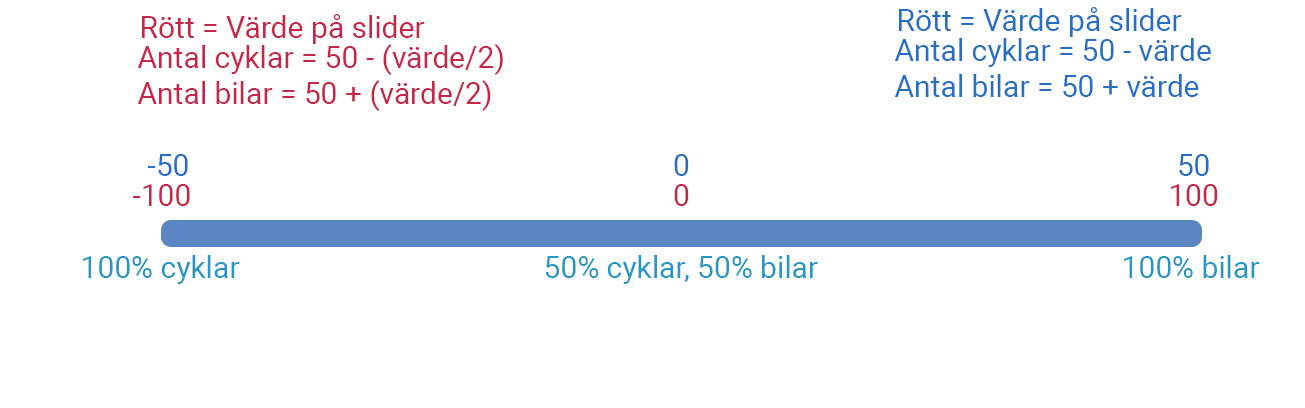
<style>
.page{position:relative;width:1305px;height:408px;background:#ffffff}
.page>*{position:absolute;margin:0}
.t1{font:30px "Roboto-Regular";color:#c52748}
.t2{font:30px "Roboto-Regular";color:#276ec5}
.t3{font:30px "Roboto-Regular";color:#2796c5}
</style>
<div class="page">
<p class="t1" style="left:142px;top:14px;width:283px;height:30px">Rött = Värde på slider</p>
<p class="t2" style="left:899px;top:7px;width:283px;height:30px">Rött = Värde på slider</p>
<p class="t2" style="left:894px;top:38px;width:317px;height:59px">Antal cyklar = 50 - värde<br>Antal bilar = 50 + värde</p>
<p class="t1" style="left:137px;top:44px;width:366px;height:67px">Antal cyklar = 50 - (värde/2)<br>Antal bilar = 50 + (värde/2)</p>
<p class="t2" style="left:148px;top:154px;width:40px;height:22px">-50</p>
<p class="t2" style="left:674px;top:154px;width:15px;height:22px">0</p>
<p class="t2" style="left:1179px;top:154px;width:30px;height:22px">50</p>
<p class="t1" style="left:133px;top:184px;width:57px;height:22px">-100</p>
<p class="t1" style="left:674px;top:184px;width:15px;height:22px">0</p>
<p class="t1" style="left:1171px;top:184px;width:47px;height:22px">100</p>
<p class="t3" style="left:83px;top:255px;width:157px;height:29px">100% cyklar</p>
<p class="t3" style="left:545px;top:255px;width:273px;height:29px">50% cyklar, 50% bilar</p>
<p class="t3" style="left:1124px;top:255px;width:136px;height:23px">100% bilar</p>
</div>
